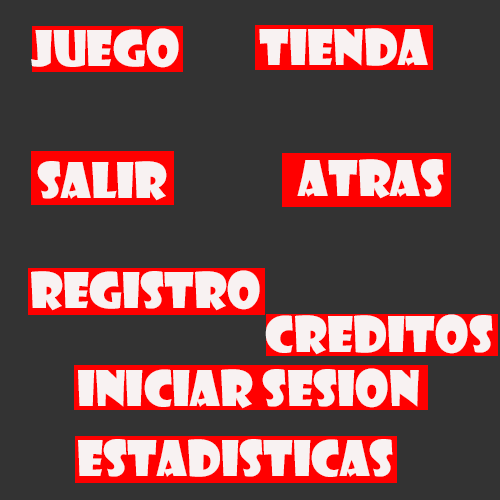
<style>
.page{position:relative;width:500px;height:500px;background:#333333}
.page>*{position:absolute;margin:0}
.t1{font:48px "ShowcardGothic-Reg";color:#f8f2f2}
</style>
<div class="page">
<p class="t1" style="left:31px;top:28px;width:148px;height:40px">JUEGO</p>
<p class="t1" style="left:259px;top:28px;width:169px;height:38px">TIENDA</p>
<p class="t1" style="left:37px;top:161px;width:130px;height:40px">SALIR</p>
<p class="t1" style="left:297px;top:159px;width:147px;height:40px">ATRAS</p>
<p class="t1" style="left:31px;top:270px;width:229px;height:41px">REGISTRO</p>
<p class="t1" style="left:265px;top:314px;width:228px;height:41px">CREDITOS</p>
<p class="t1" style="left:78px;top:368px;width:341px;height:41px">INICIAR SESION</p>
<p class="t1" style="left:78px;top:439px;width:315px;height:38px">ESTADISTICAS</p>
</div>
